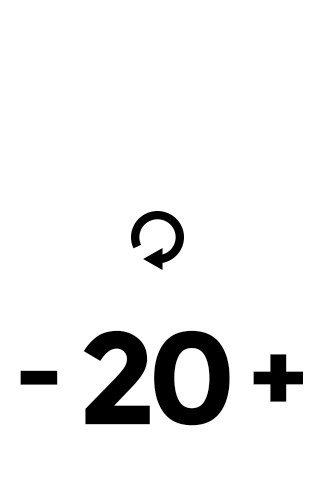
<style>
.page{position:relative;width:320px;height:480px;background:#ffffff}
.page>*{position:absolute;margin:0}
.t1{font:129.9px "Montserrat-Bold";letter-spacing:-0.1em;color:#000000;font-weight:bold}
.t2{font:95.7px "Montserrat-Bold";letter-spacing:-0.08em;color:#000000;font-weight:bold}
</style>
<div class="page">
<p class="t1" style="left:83px;top:330px;width:147px;height:96px">20</p>
<p class="t2" style="left:253px;top:354px;width:50px;height:48px">+</p>
<p class="t2" style="left:20px;top:370px;width:38px;height:15px">-</p>
</div>
